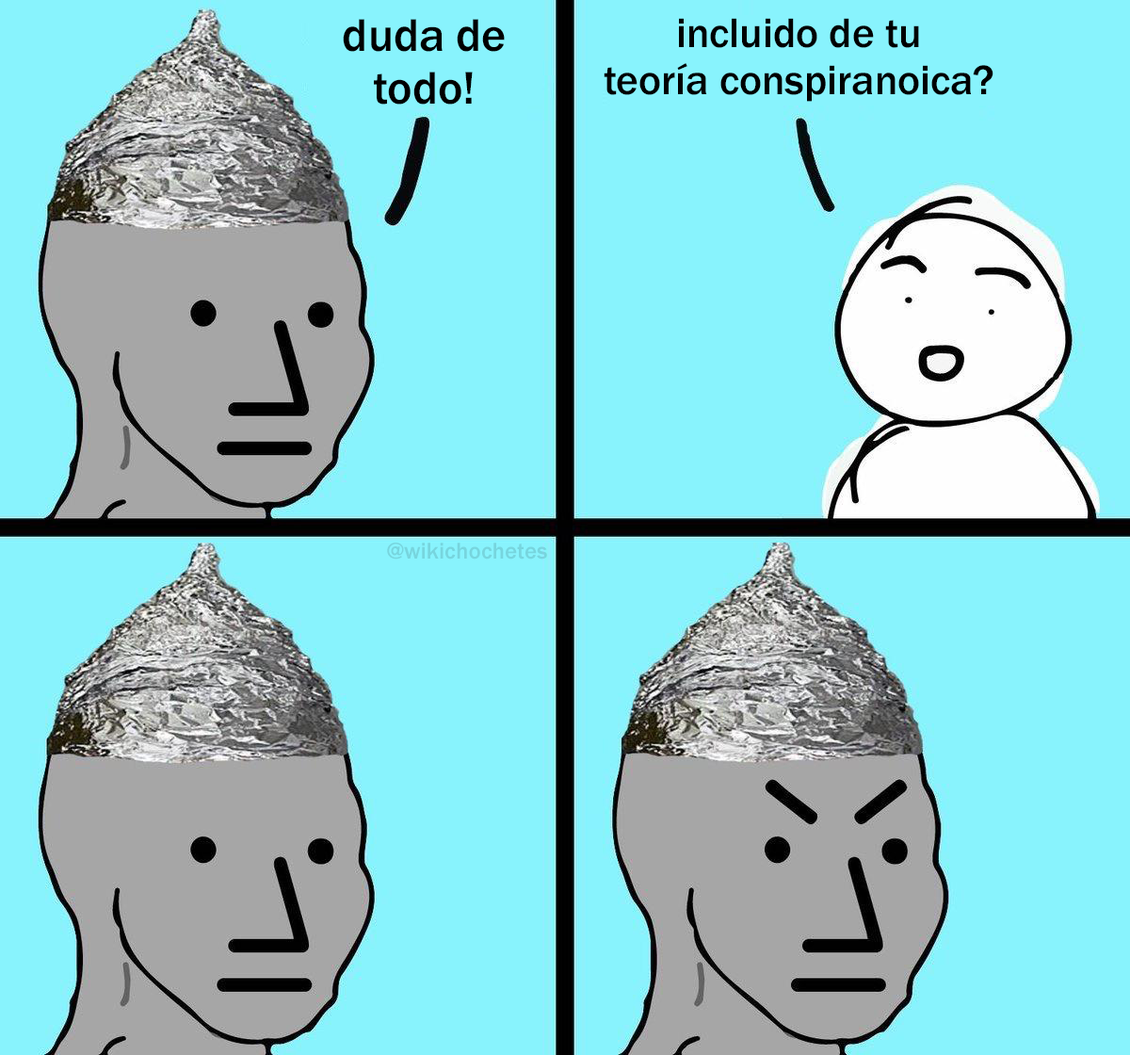
<style>
.page{position:relative;width:1130px;height:1055px;background:#88f3fd}
.page>*{position:absolute;margin:0}
.t1{font:42.6px "FranklinGothic-Medium";color:#000000}
.t2{font:47.3px "FranklinGothic-Medium";color:#000000}
.t3{font:23.6px "FranklinGothic-Medium";color:#77d5de}
</style>
<div class="page">
<p class="t1" style="left:604px;top:18px;width:390px;height:84px;text-align:center">incluido de tu<br>teoría conspiranoica?</p>
<p class="t2" style="left:343px;top:19px;width:162px;height:86px;text-align:center">duda de<br>todo!</p>
<p class="t3" style="left:387px;top:543px;width:160px;height:17px">@wikichochetes</p>
</div>
